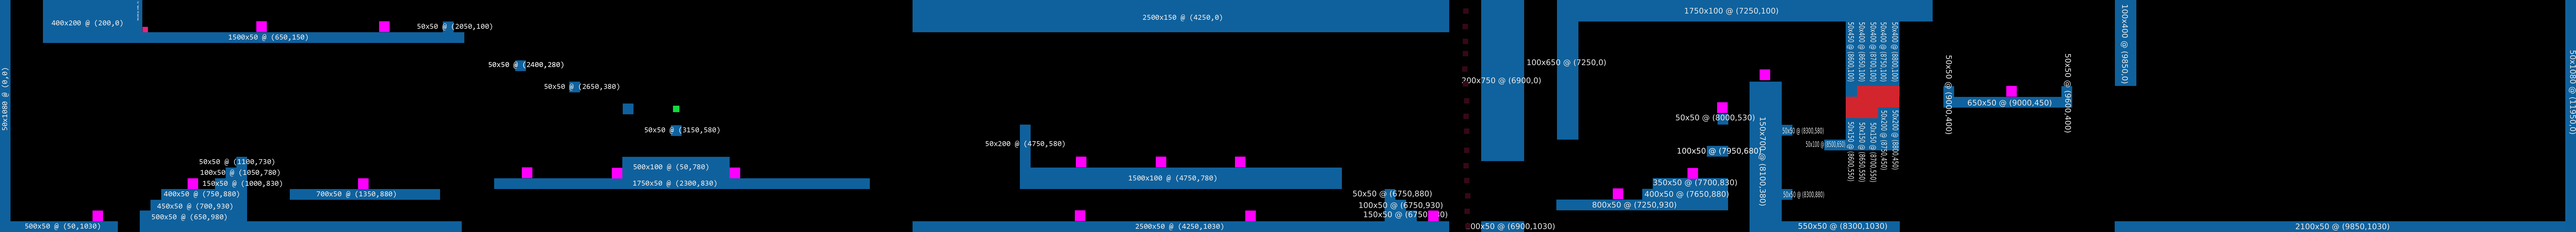
<style>
.page{position:relative;width:2576px;height:232px;background:#000000}
.page>*{position:absolute;margin:0}
.t1{font:2.1px "Consolas";color:#e8e8e8}
.t2{font:7.7px "Consolas";color:#e8e8e8}
.t3{font:7.7px "Consolas";color:#e8e8e8;scale:0.71 1}
.t4{font:7.7px "Consolas";color:#e8e8e8;scale:0.52 1}
.t5{font:7.7px "Consolas";color:#e8e8e8;scale:0.47 1}
</style>
<div class="page">
<p class="t1" style="left:137px;top:1px;width:2px;height:20px;rotate:-90deg">50x100 @ (400, 0)</p>
<p class="t2" style="left:2121px;top:5px;width:7px;height:78px;rotate:90deg">100x400 @ (9850,0)</p>
<p class="t2" style="left:1143px;top:14px;width:79px;height:7px">2500x150 @ (4250,0)</p>
<p class="t2" style="left:1685px;top:8px;width:93px;height:7px">1750x100 @ (7250,100)</p>
<p class="t2" style="left:52px;top:20px;width:71px;height:7px">400x200 @ (200,0)</p>
<p class="t2" style="left:418px;top:23px;width:74px;height:7px">50x50 @ (2050,100)</p>
<p class="t3" style="left:1847px;top:22px;width:7px;height:59px;rotate:90deg">50x450 @ (8600,100)</p>
<p class="t3" style="left:1858px;top:22px;width:7px;height:59px;rotate:90deg">50x400 @ (8650,100)</p>
<p class="t3" style="left:1869px;top:22px;width:8px;height:59px;rotate:90deg">50x400 @ (8700,100)</p>
<p class="t3" style="left:1879px;top:22px;width:8px;height:59px;rotate:90deg">50x400 @ (8750,100)</p>
<p class="t3" style="left:1891px;top:22px;width:7px;height:59px;rotate:90deg">50x400 @ (8800,100)</p>
<p class="t2" style="left:229px;top:34px;width:79px;height:7px">1500x50 @ (650,150)</p>
<p class="t2" style="left:2064px;top:54px;width:7px;height:78px;rotate:90deg">50x50 @ (9600,400)</p>
<p class="t2" style="left:2569px;top:50px;width:7px;height:84px;rotate:90deg">50x1080 @ (11950,0)</p>
<p class="t2" style="left:489px;top:61px;width:75px;height:7px">50x50 @ (2400,280)</p>
<p class="t2" style="left:489px;top:61px;width:75px;height:7px">50x50 @ (2400,280)</p>
<p class="t2" style="left:1527px;top:59px;width:79px;height:8px">100x650 @ (7250,0)</p>
<p class="t2" style="left:1945px;top:55px;width:7px;height:79px;rotate:90deg">50x50 @ (9000,400)</p>
<p class="t2" style="left:2px;top:68px;width:7px;height:62px;rotate:-90deg">50x1080 @ (0,0)</p>
<p class="t2" style="left:1462px;top:77px;width:79px;height:8px">200x750 @ (6900,0)</p>
<p class="t2" style="left:545px;top:83px;width:74px;height:7px">50x50 @ (2650,380)</p>
<p class="t2" style="left:1968px;top:99px;width:83px;height:8px">650x50 @ (9000,450)</p>
<p class="t3" style="left:1880px;top:111px;width:7px;height:59px;rotate:90deg">50x200 @ (8750,450)</p>
<p class="t3" style="left:1891px;top:110px;width:8px;height:59px;rotate:90deg">50x200 @ (8800,450)</p>
<p class="t2" style="left:1676px;top:114px;width:78px;height:8px">50x50 @ (8000,530)</p>
<p class="t2" style="left:1759px;top:117px;width:7px;height:89px;rotate:90deg">150x700 @ (8100,380)</p>
<p class="t3" style="left:1847px;top:122px;width:7px;height:59px;rotate:90deg">50x150 @ (8600,550)</p>
<p class="t3" style="left:1858px;top:123px;width:7px;height:59px;rotate:90deg">50x150 @ (8650,550)</p>
<p class="t3" style="left:1869px;top:123px;width:8px;height:59px;rotate:90deg">50x150 @ (8700,550)</p>
<p class="t2" style="left:645px;top:127px;width:75px;height:7px">50x50 @ (3150,580)</p>
<p class="t4" style="left:1783px;top:127px;width:41px;height:8px">50x50 @ (8300,580)</p>
<p class="t2" style="left:986px;top:140px;width:79px;height:7px">50x200 @ (4750,580)</p>
<p class="t2" style="left:1678px;top:147px;width:83px;height:8px">100x50 @ (7950,680)</p>
<p class="t2" style="left:1678px;top:147px;width:83px;height:8px">100x50 @ (7950,680)</p>
<p class="t5" style="left:1806px;top:141px;width:39px;height:7px">50x100 @ (8500,650)</p>
<p class="t2" style="left:200px;top:158px;width:74px;height:8px">50x50 @ (1100,730)</p>
<p class="t2" style="left:200px;top:169px;width:80px;height:7px">100x50 @ (1050,780)</p>
<p class="t2" style="left:634px;top:164px;width:74px;height:7px">500x100 @ (50,780)</p>
<p class="t2" style="left:203px;top:180px;width:79px;height:7px">150x50 @ (1000,830)</p>
<p class="t2" style="left:633px;top:180px;width:84px;height:7px">1750x50 @ (2300,830)</p>
<p class="t2" style="left:1129px;top:175px;width:88px;height:7px">1500x100 @ (4750,780)</p>
<p class="t2" style="left:1653px;top:179px;width:84px;height:8px">350x50 @ (7700,830)</p>
<p class="t2" style="left:164px;top:191px;width:75px;height:7px">400x50 @ (750,880)</p>
<p class="t2" style="left:317px;top:191px;width:79px;height:7px">700x50 @ (1350,880)</p>
<p class="t2" style="left:1353px;top:190px;width:79px;height:8px">50x50 @ (6750,880)</p>
<p class="t2" style="left:1645px;top:191px;width:83px;height:7px">400x50 @ (7650,880)</p>
<p class="t4" style="left:1783px;top:191px;width:41px;height:8px">50x50 @ (8300,880)</p>
<p class="t2" style="left:157px;top:203px;width:75px;height:7px">450x50 @ (700,930)</p>
<p class="t2" style="left:1359px;top:202px;width:84px;height:7px">100x50 @ (6750,930)</p>
<p class="t2" style="left:1592px;top:201px;width:84px;height:8px">800x50 @ (7250,930)</p>
<p class="t2" style="left:152px;top:214px;width:75px;height:7px">500x50 @ (650,980)</p>
<p class="t2" style="left:1364px;top:211px;width:83px;height:8px">150x50 @ (6750,980)</p>
<p class="t2" style="left:25px;top:223px;width:75px;height:7px">500x50 @ (50,1030)</p>
<p class="t2" style="left:1136px;top:223px;width:87px;height:7px">2500x50 @ (4250,1030)</p>
<p class="t2" style="left:1466px;top:223px;width:89px;height:7px">200x50 @ (6900,1030)</p>
<p class="t2" style="left:1798px;top:223px;width:89px;height:7px">550x50 @ (8300,1030)</p>
<p class="t2" style="left:2296px;top:223px;width:93px;height:8px">2100x50 @ (9850,1030)</p>
</div>
